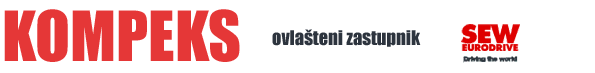
<style>
.page{position:relative;width:595px;height:73px;background:#ffffff}
.page>*{position:absolute;margin:0}
.t1{font:64px "Impact";color:#e53737}
.t2{font:18.7px "Impact";color:#2d343e}
</style>
<div class="page">
<p class="t1" style="left:4px;top:9px;width:236px;height:53px">KOMPEKS</p>
<p class="t2" style="left:272px;top:29px;width:149px;height:18px">ovlašteni zastupnik</p>
</div>
